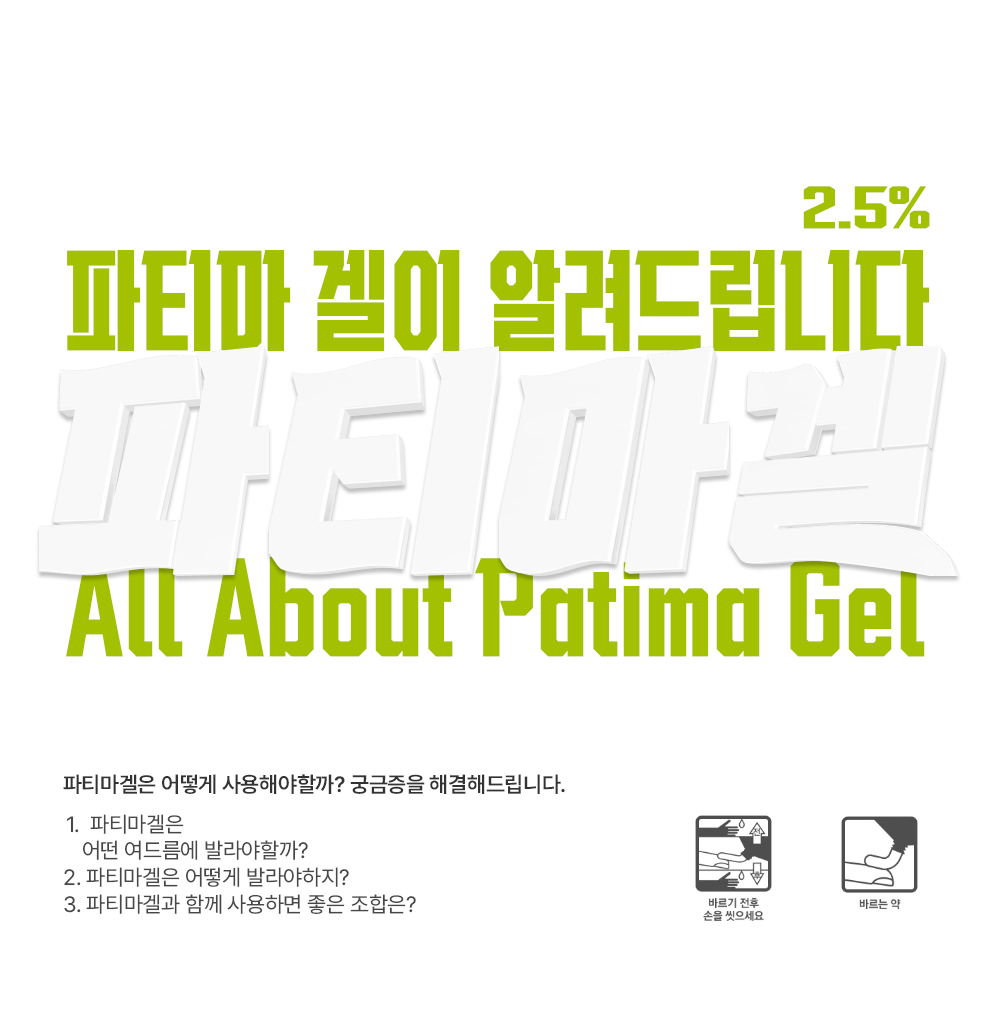
<style>
.page{position:relative;width:995px;height:1030px;background:#ffffff}
.page>*{position:absolute;margin:0}
.t1{font:47px "VITRO-INSPIRE-TTF";letter-spacing:-0.005em;color:#a3c100;scale:1.59 1}
.t2{font:108.9px "VITRO-INSPIRE-TTF";letter-spacing:-0.005em;color:#a3c100}
.t3{font:22px "Pretendard-SemiBold";letter-spacing:-0.015em;color:#333333}
.t4{font:22px "Pretendard-Regular";letter-spacing:-0.015em;color:#474747}
</style>
<div class="page">
<p class="t1" style="left:803px;top:186px;width:127px;height:43px">2.5%</p>
<p class="t2" style="left:67px;top:249px;width:863px;height:103px">파티마 겔이 알려드립니다</p>
<p class="t2" style="left:66px;top:556px;width:859px;height:101px">All About Patima Gel</p>
<p class="t3" style="left:63px;top:774px;width:502px;height:20px">파티마겔은 어떻게 사용해야할까? 궁금증을 해결해드립니다.</p>
<p class="t4" style="left:67px;top:814px;width:241px;height:46px">1.  파티마겔은 <br>   어떤 여드름에 발라야할까?</p>
<p class="t4" style="left:64px;top:867px;width:285px;height:20px">2. 파티마겔은 어떻게 발라야하지?</p>
<p class="t4" style="left:64px;top:894px;width:352px;height:20px">3. 파티마겔과 함께 사용하면 좋은 조합은?</p>
</div>
